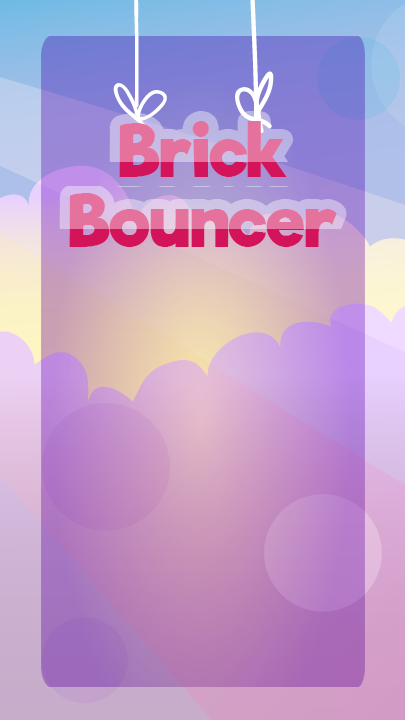
<style>
.page{position:relative;width:405px;height:720px}
.page>*{position:absolute;margin:0}
.t1{font:70px/70px "RifficFree-Bold"}
</style>
<div class="page">
<p class="t1" style="left:69px;top:121px;width:268px;height:126px;text-align:center">Brick <br>Bouncer</p>
<p class="t1" style="left:69px;top:121px;width:268px;height:126px;text-align:center">Brick<br>Bouncer</p>
</div>
